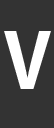
<style>
.page{position:relative;width:54px;height:128px;background:#333333}
.page>*{position:absolute;margin:0}
.t1{font:75px "AdobeGothicStd-Bold";color:#ffffff}
</style>
<div class="page">
<p class="t1" style="left:4px;top:31px;width:47px;height:58px">V</p>
</div>
